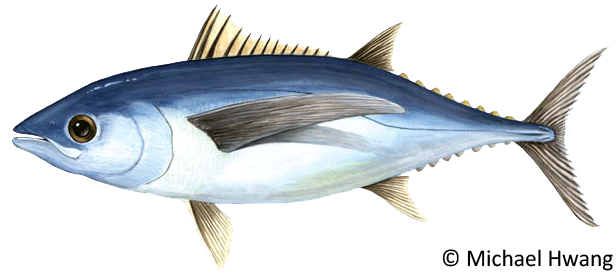
<style>
.page{position:relative;width:616px;height:274px;background:#ffffff}
.page>*{position:absolute;margin:0}
.t1{font:24px "Calibri";color:#000000}
</style>
<div class="page">
<p class="t1" style="left:442px;top:249px;width:171px;height:22px">© Michael Hwang</p>
</div>
